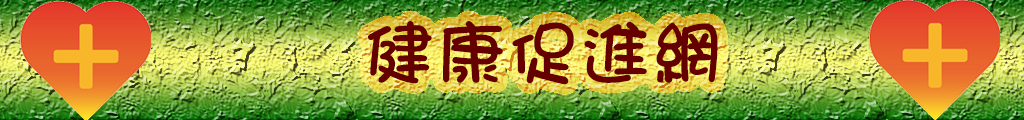
<style>
.page{position:relative;width:1024px;height:120px}
.page>*{position:absolute;margin:0}
.t1{font:72px "DFGirlStd-W7";color:#640000}
</style>
<div class="page">
<p class="t1" style="left:368px;top:21px;width:350px;height:64px">健康促進網</p>
</div>
